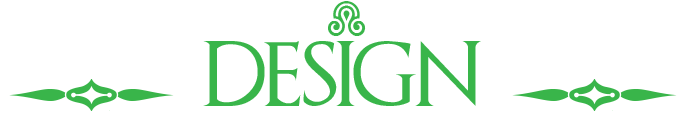
<style>
.page{position:relative;width:687px;height:115px;background:#ffffff}
.page>*{position:absolute;margin:0}
.t1{font:65px "SoftOrnamentsFourteen";color:#39b54a}
.t2{font:65px "GameofThrones";color:#39b54a}
.t3{font:120px "SoftOrnamentsFourteen";color:#39b54a}
</style>
<div class="page">
<p class="t1" style="left:328px;top:1px;width:38px;height:35px">I</p>
<p class="t2" style="left:203px;top:41px;width:278px;height:65px">Design</p>
<p class="t3" style="left:9px;top:79px;width:165px;height:32px">J</p>
<p class="t3" style="left:512px;top:79px;width:165px;height:32px">J</p>
</div>
